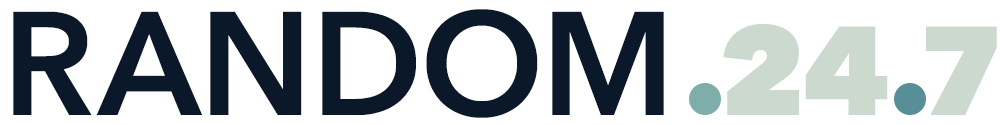
<style>
.page{position:relative;width:1000px;height:125px;background:#ffffff}
.page>*{position:absolute;margin:0}
.t1{font:145.8px "AvenirNext-DemiBold";color:#0a1829;text-transform:uppercase}
.t2{font:125px "AvenirNext-Heavy";color:#ccd9ce;text-transform:uppercase}
</style>
<div class="page">
<p class="t1" style="left:13px;top:9px;width:651px;height:109px">RANDOM</p>
<p class="t2" style="left:723px;top:24px;width:165px;height:91px">24</p>
<p class="t2" style="left:926px;top:26px;width:71px;height:89px">7</p>
</div>
